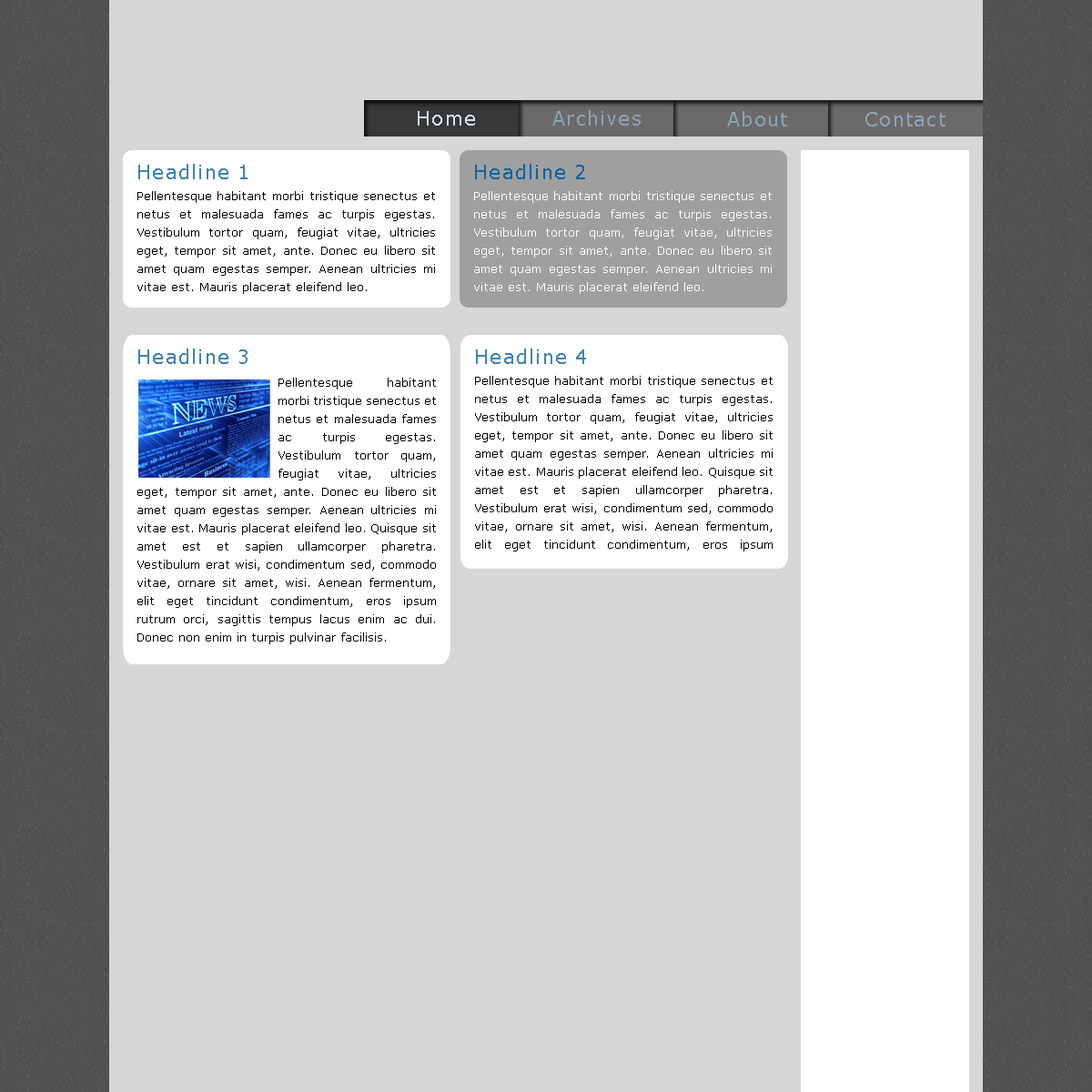
<style>
.page{position:relative;width:1092px;height:1092px;background:#d6d6d6}
.page>*{position:absolute;margin:0}
.t1{font:19.1px "Verdana";letter-spacing:0.06em;color:#d0e2ee}
.t2{font:19.1px "Verdana";letter-spacing:0.06em;color:#89a3b5}
.t3{font:19.1px "Verdana";letter-spacing:0.06em;color:#3f83b2}
.t4{font:19.1px "Verdana";letter-spacing:0.06em;color:#0e639e}
.t5{font:11.8px/18.2px "Verdana";color:#000000}
.t6{font:11.8px/18.2px "Verdana";color:#ffffff}
</style>
<div class="page">
<p class="t1" style="left:418px;top:111px;width:57px;height:15px">Home</p>
<p class="t2" style="left:552px;top:110px;width:89px;height:16px">Archives</p>
<p class="t2" style="left:727px;top:111px;width:60px;height:15px">About</p>
<p class="t2" style="left:865px;top:112px;width:80px;height:14px">Contact</p>
<p class="t3" style="left:138px;top:164px;width:110px;height:15px">Headline 1</p>
<p class="t4" style="left:475px;top:164px;width:110px;height:15px">Headline 2</p>
<p class="t5" style="left:137px;top:191px;width:298px;height:103px;text-align:justify">Pellentesque habitant morbi tristique senectus et netus et malesuada fames ac turpis egestas. Vestibulum tortor quam, feugiat vitae, ultricies eget, tempor sit amet, ante. Donec eu libero sit amet quam egestas semper. Aenean ultricies mi vitae est. Mauris placerat eleifend leo.</p>
<p class="t6" style="left:474px;top:191px;width:298px;height:103px;text-align:justify">Pellentesque habitant morbi tristique senectus et netus et malesuada fames ac turpis egestas. Vestibulum tortor quam, feugiat vitae, ultricies eget, tempor sit amet, ante. Donec eu libero sit amet quam egestas semper. Aenean ultricies mi vitae est. Mauris placerat eleifend leo.</p>
<p class="t3" style="left:138px;top:349px;width:110px;height:15px">Headline 3</p>
<p class="t3" style="left:476px;top:349px;width:110px;height:15px">Headline 4</p>
<p class="t5" style="left:137px;top:378px;width:299px;height:266px;text-align:justify">Pellentesque habitant morbi tristique senectus et netus et malesuada fames ac turpis egestas. Vestibulum tortor quam, feugiat vitae, ultricies eget, tempor sit amet, ante. Donec eu libero sit amet quam egestas semper. Aenean ultricies mi vitae est. Mauris placerat eleifend leo. Quisque sit amet est et sapien ullamcorper pharetra. Vestibulum erat wisi, condimentum sed, commodo vitae, ornare sit amet, wisi. Aenean fermentum, elit eget tincidunt condimentum, eros ipsum rutrum orci, sagittis tempus lacus enim ac dui. Donec non enim in turpis pulvinar facilisis.</p>
<p class="t5" style="left:475px;top:376px;width:298px;height:175px;text-align:justify">Pellentesque habitant morbi tristique senectus et netus et malesuada fames ac turpis egestas. Vestibulum tortor quam, feugiat vitae, ultricies eget, tempor sit amet, ante. Donec eu libero sit amet quam egestas semper. Aenean ultricies mi vitae est. Mauris placerat eleifend leo. Quisque sit amet est et sapien ullamcorper pharetra. Vestibulum erat wisi, condimentum sed, commodo vitae, ornare sit amet, wisi. Aenean fermentum, elit eget tincidunt condimentum, eros ipsum rutrum orci, sagittis tempus lacus enim ac dui. Donec non enim in turpis pulvinar facilisis. Ut felis. Praesent dapibus, neque id cursus faucibus, tortor neque egestas augue, eu vulputate magna eros eu erat. Aliquam erat volutpat.</p>
</div>
